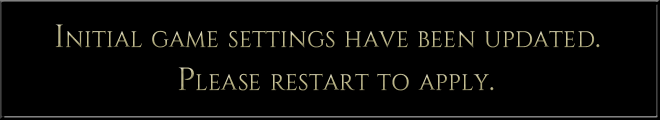
<style>
.page{position:relative;width:660px;height:120px;background:#000000}
.page>*{position:absolute;margin:0}
.t1{font:32px/16px "Cinzel-Regular";letter-spacing:0.01em;color:#bbb586;font-variant:small-caps}
</style>
<div class="page">
<p class="t1" style="left:55px;top:24px;width:545px;height:67px;text-align:center">Initial game settings have been updated.  <br>Please restart to apply.</p>
</div>
